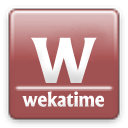
<style>
.page{position:relative;width:128px;height:128px}
.page>*{position:absolute;margin:0}
.t1{font:85.3px "Albertus-Bold";color:#ffffff}
.t2{font:19.6px "Albertus-Bold";color:#ffffff}
</style>
<div class="page">
<p class="t1" style="left:31px;top:37px;width:66px;height:46px">w</p>
<p class="t2" style="left:22px;top:91px;width:82px;height:16px">wekatime</p>
</div>
